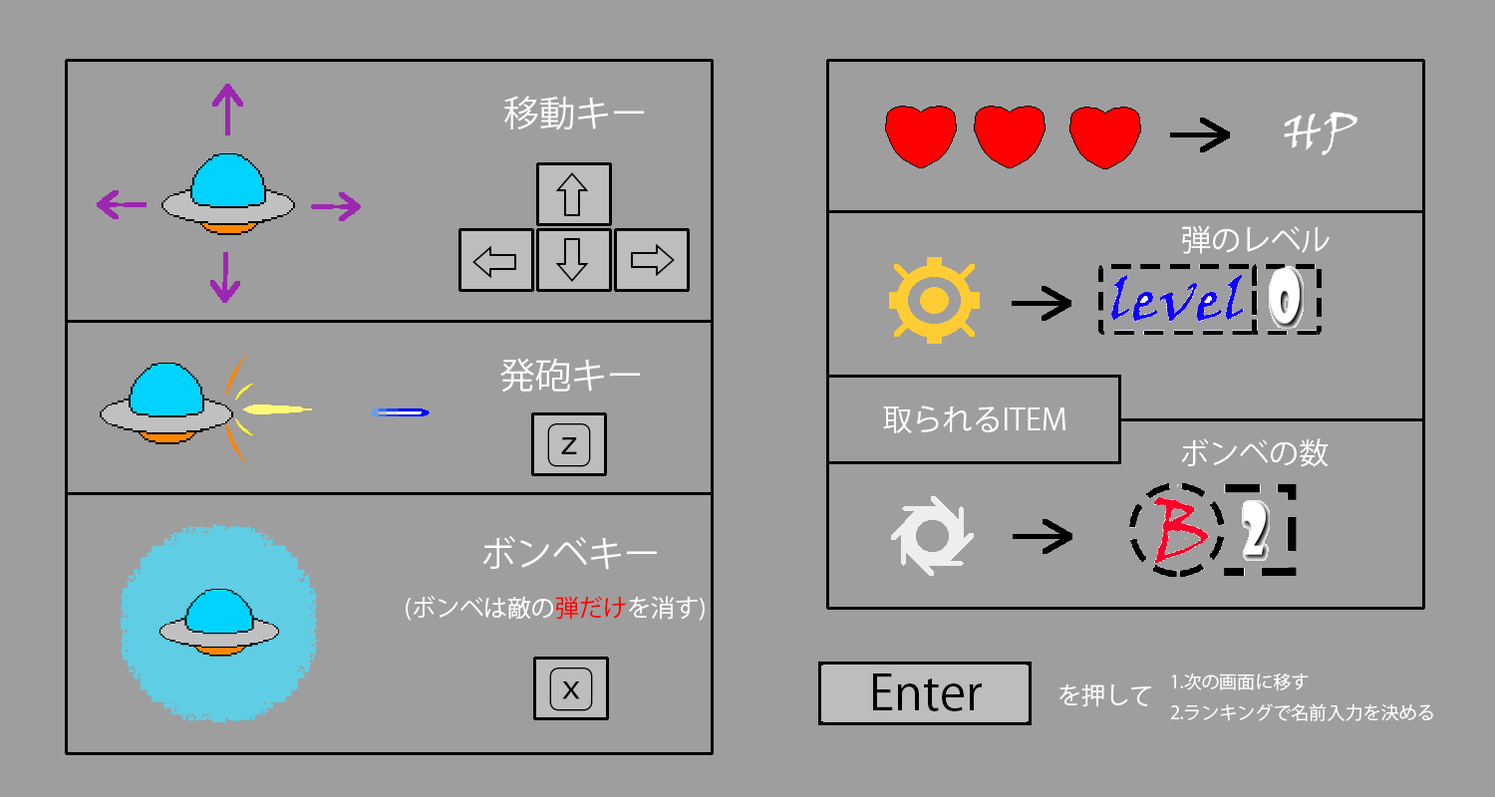
<style>
.page{position:relative;width:1495px;height:797px;background:#9e9e9e}
.page>*{position:absolute;margin:0}
.t1{font:35.9px "KozGoPr6N-Regular";color:#ffffff}
.t2{font:47.8px "KozGoPr6N-Regular";color:#000000}
.t3{font:29.9px "KozGoPr6N-Regular";color:#ffffff}
.t4{font:23.9px "KozGoPr6N-Regular";color:#ffffff}
.t5{font:23.9px "KozGoPr6N-Regular";color:#ff0000}
.t6{font:17.9px "KozGoPr6N-Regular";color:#ffffff}
</style>
<div class="page">
<p class="t1" style="left:504px;top:96px;width:140px;height:35px">移動キー</p>
<p class="t2" style="left:555px;top:172px;width:34px;height:44px">⇦</p>
<p class="t2" style="left:473px;top:245px;width:43px;height:34px">⇩</p>
<p class="t2" style="left:555px;top:238px;width:34px;height:44px">⇨</p>
<p class="t2" style="left:631px;top:243px;width:44px;height:34px">⇧</p>
<p class="t1" style="left:500px;top:358px;width:140px;height:35px">発砲キー</p>
<p class="t3" style="left:883px;top:406px;width:183px;height:28px">取られるITEM</p>
<p class="t2" style="left:547px;top:424px;width:44px;height:44px">z</p>
<p class="t1" style="left:482px;top:536px;width:175px;height:34px">ボンベキー</p>
<p class="t4" style="left:406px;top:596px;width:299px;height:25px">(ボンベは敵の<span class="t5">弾だけ</span>を消す)</p>
<p class="t2" style="left:549px;top:668px;width:44px;height:44px">x</p>
<p class="t2" style="left:873px;top:674px;width:109px;height:38px">Enter</p>
<p class="t6" style="left:1170px;top:673px;width:263px;height:49px">1.次の画面に移す<br>2.ランキングで名前入力を決める</p>
<p class="t4" style="left:1060px;top:685px;width:92px;height:23px">を押して</p>
</div>
